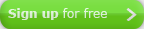
<style>
.page{position:relative;width:144px;height:29px}
.page>*{position:absolute;margin:0}
.t1{font:12px "Verdana";color:#daecd3}
.t2{font:12px "Verdana-Bold";color:#daecd3}
</style>
<div class="page">
<p class="t1" style="left:8px;top:8px;width:99px;height:12px"><span class="t2">Sign up</span> for free</p>
</div>
